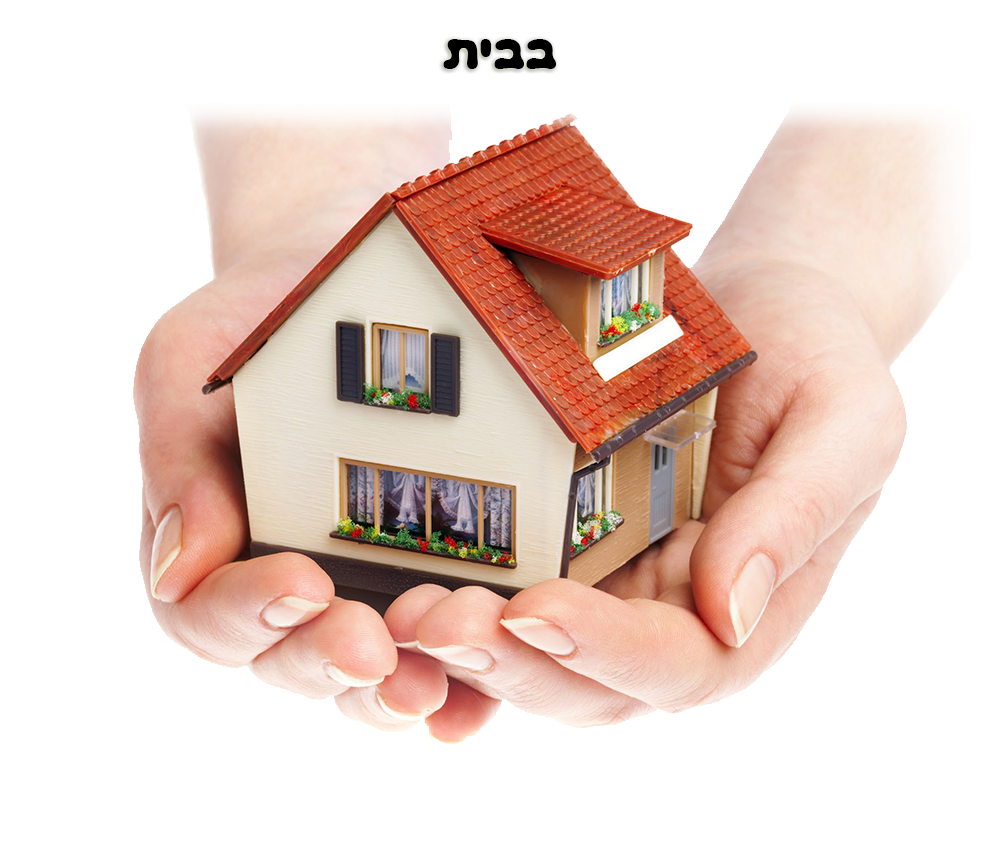
<style>
.page{position:relative;width:1000px;height:841px;background:#ffffff}
.page>*{position:absolute;margin:0}
.t1{font:48px "GanCLM-Bold";color:#000000}
</style>
<div class="page">
<p class="t1" style="left:443px;top:39px;width:114px;height:30px">תיבב</p>
</div>
